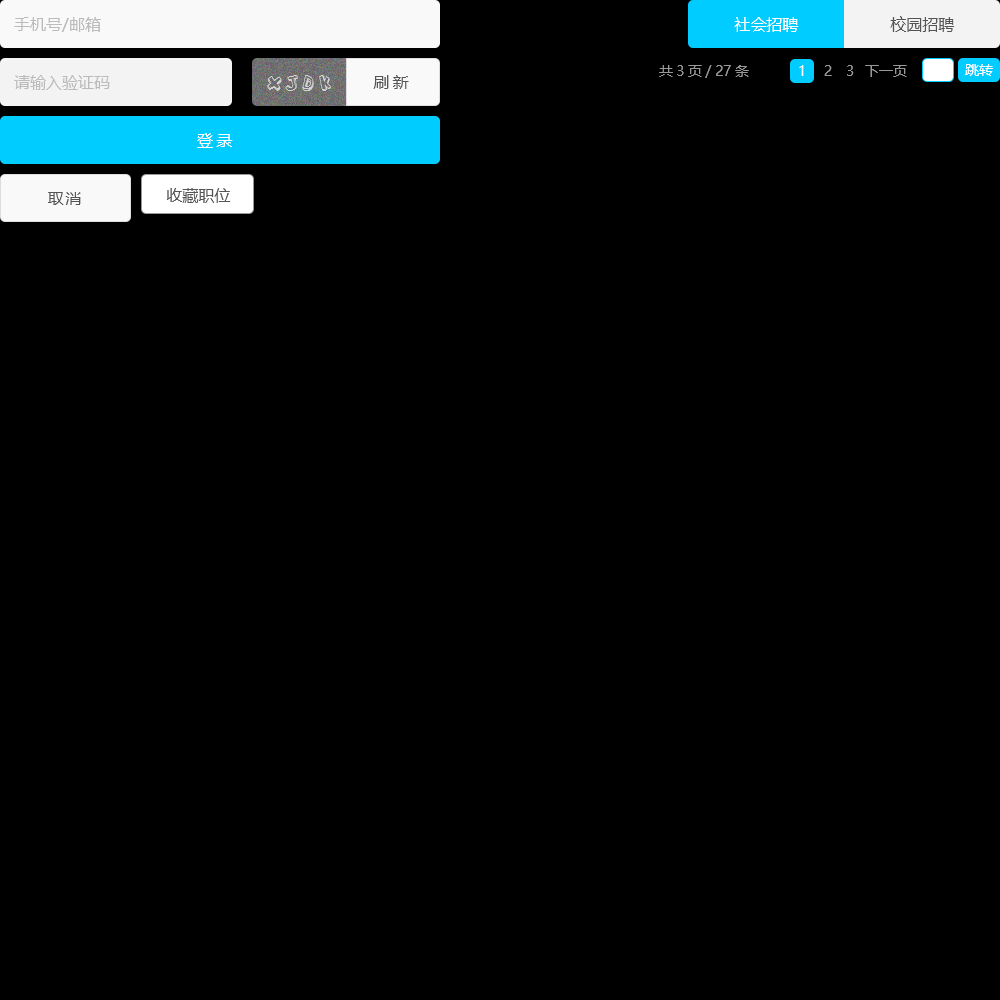
<style>
.page{position:relative;width:1000px;height:1000px;background:#000000}
.page>*{position:absolute;margin:0}
.t1{font:16px "MicrosoftYaHei";color:#bbbbbb}
.t2{font:16px "MicrosoftYaHei";color:#ffffff}
.t3{font:16px "MicrosoftYaHei";color:#555555}
.t4{font:14px "MicrosoftYaHei";color:#999999}
.t5{font:14px "MicrosoftYaHei";color:#fffefe}
.t6{font:14px "MicrosoftYaHei";color:#ffffff}
.t7{font:20px "ActionJackson";letter-spacing:0.2em;color:#d3d3d3}
.t8{font:16px "MicrosoftYaHei";letter-spacing:0.2em;color:#555555}
.t9{font:16px "MicrosoftYaHei";letter-spacing:0.2em;color:#ffffff}
.t10{font:16px "MicrosoftYaHei";letter-spacing:0.1em;color:#555555}
</style>
<div class="page">
<p class="t1" style="left:14px;top:17px;width:87px;height:15px">手机号/邮箱</p>
<p class="t2" style="left:734px;top:17px;width:65px;height:15px">社会招聘</p>
<p class="t3" style="left:890px;top:16px;width:65px;height:16px">校园招聘</p>
<p class="t4" style="left:659px;top:65px;width:90px;height:13px">共3页/ 27条</p>
<p class="t5" style="left:799px;top:65px;width:5px;height:11px">1</p>
<p class="t4" style="left:824px;top:65px;width:8px;height:11px">2</p>
<p class="t4" style="left:847px;top:65px;width:7px;height:11px">3</p>
<p class="t4" style="left:865px;top:65px;width:42px;height:12px">下一页</p>
<p class="t6" style="left:965px;top:64px;width:28px;height:12px">跳转</p>
<p class="t1" style="left:14px;top:75px;width:96px;height:15px">请输入验证码</p>
<p class="t7" style="left:267px;top:75px;width:64px;height:16px">XJDK</p>
<p class="t8" style="left:373px;top:75px;width:36px;height:14px">刷新</p>
<p class="t9" style="left:197px;top:133px;width:36px;height:15px">登录</p>
<p class="t10" style="left:48px;top:192px;width:33px;height:13px">取消</p>
<p class="t3" style="left:167px;top:188px;width:64px;height:15px">收藏职位</p>
</div>
